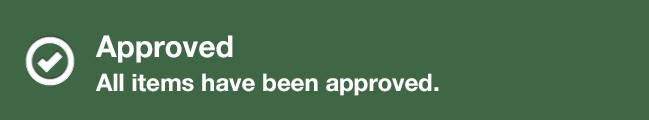
<style>
.page{position:relative;width:649px;height:120px;background:#3f6645}
.page>*{position:absolute;margin:0}
.t1{font:30px "HelveticaNeue-Bold";color:#ffffff}
.t2{font:24px "HelveticaNeue-Bold";color:#ffffff}
</style>
<div class="page">
<p class="t1" style="left:95px;top:35px;width:138px;height:28px">Approved</p>
<p class="t2" style="left:95px;top:73px;width:344px;height:23px">All items have been approved.</p>
</div>
